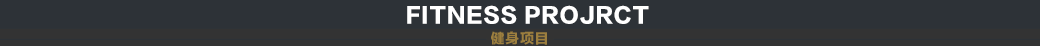
<style>
.page{position:relative;width:1040px;height:46px;background:#2d3237}
.page>*{position:absolute;margin:0}
.t1{font:35px "FZLTTHJW--GB1-0";letter-spacing:0.05em;color:#ffffff}
.t2{font:24px "FZLTTHJW--GB1-0";letter-spacing:0.05em;color:#9c7e3e}
</style>
<div class="page">
<p class="t1" style="left:407px;top:5px;width:242px;height:19px">FITNESS PROJRCT</p>
<p class="t2" style="left:491px;top:31px;width:56px;height:14px">健身项目</p>
</div>
